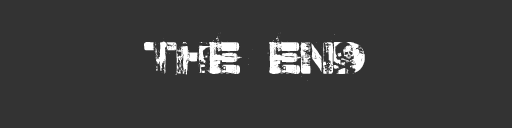
<style>
.page{position:relative;width:512px;height:128px;background:#333333}
.page>*{position:absolute;margin:0}
.t1{font:40px "WeekendWarrior";color:#ffffff}
</style>
<div class="page">
<p class="t1" style="left:144px;top:32px;width:221px;height:49px">The  end</p>
</div>
